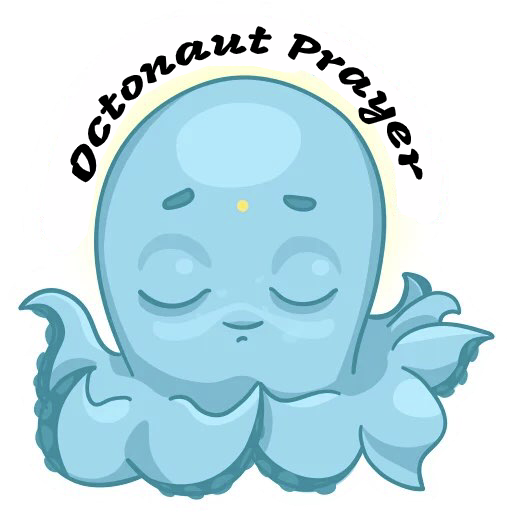
<style>
.page{position:relative;width:512px;height:512px;background:#ffffff}
.page>*{position:absolute;margin:0}
.t1{font:38px "Mogra-Regular";color:#000000}
</style>
<div class="page">
<p class="t1" style="left:70px;top:26px;width:353px;height:157px">Octonaut Prayer</p>
</div>
